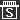
<style>
.page{position:relative;width:20px;height:20px;background:#333333}
.page>*{position:absolute;margin:0}
.t1{font:15.8px "CenturyGothic";color:#ffffff;font-weight:bold;scale:1.1 1}
</style>
<div class="page">
<p class="t1" style="left:6px;top:8px;width:7px;height:9px">s</p>
</div>
